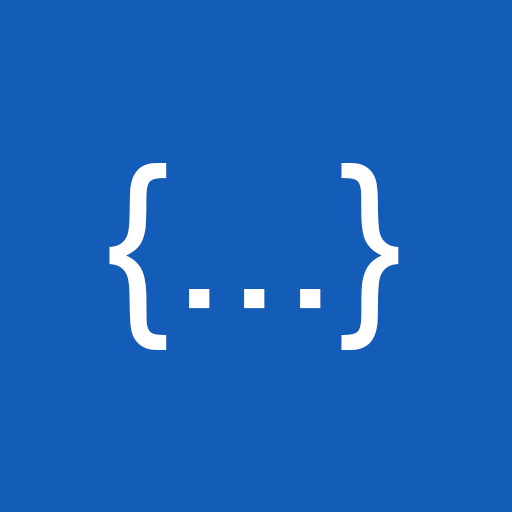
<style>
.page{position:relative;width:512px;height:512px;background:#135db8}
.page>*{position:absolute;margin:0}
.t1{font:200px "ArialMT";color:#ffffff}
</style>
<div class="page">
<p class="t1" style="left:109px;top:163px;width:290px;height:187px">{...}</p>
</div>
